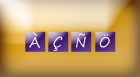
<style>
.page{position:relative;width:140px;height:77px}
.page>*{position:absolute;margin:0}
.t1{font:13.9px "SegoePrint";color:#ffffff}
</style>
<div class="page">
<p class="t1" style="left:29px;top:32px;width:11px;height:16px">À</p>
<p class="t1" style="left:53px;top:36px;width:10px;height:15px">Ç</p>
<p class="t1" style="left:76px;top:33px;width:10px;height:15px">Ñ</p>
<p class="t1" style="left:99px;top:34px;width:11px;height:14px">Ö</p>
</div>
